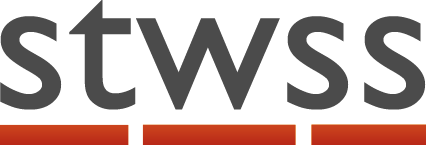
<style>
.page{position:relative;width:426px;height:145px;background:#ffffff}
.page>*{position:absolute;margin:0}
.t1{font:200px "GillSans";color:#4b4b4b}
</style>
<div class="page">
<p class="t1" style="left:0px;top:0px;width:426px;height:110px">stwss</p>
</div>
